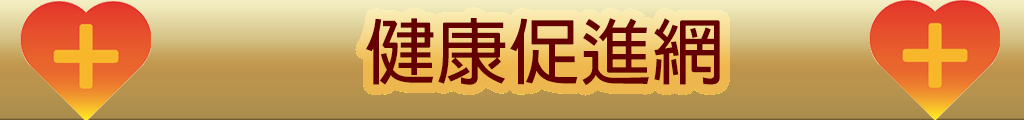
<style>
.page{position:relative;width:1024px;height:120px}
.page>*{position:absolute;margin:0}
.t1{font:72px "AdobeFanHeitiStd-Bold";color:#640000}
</style>
<div class="page">
<p class="t1" style="left:365px;top:18px;width:355px;height:68px">健康促進網</p>
</div>
